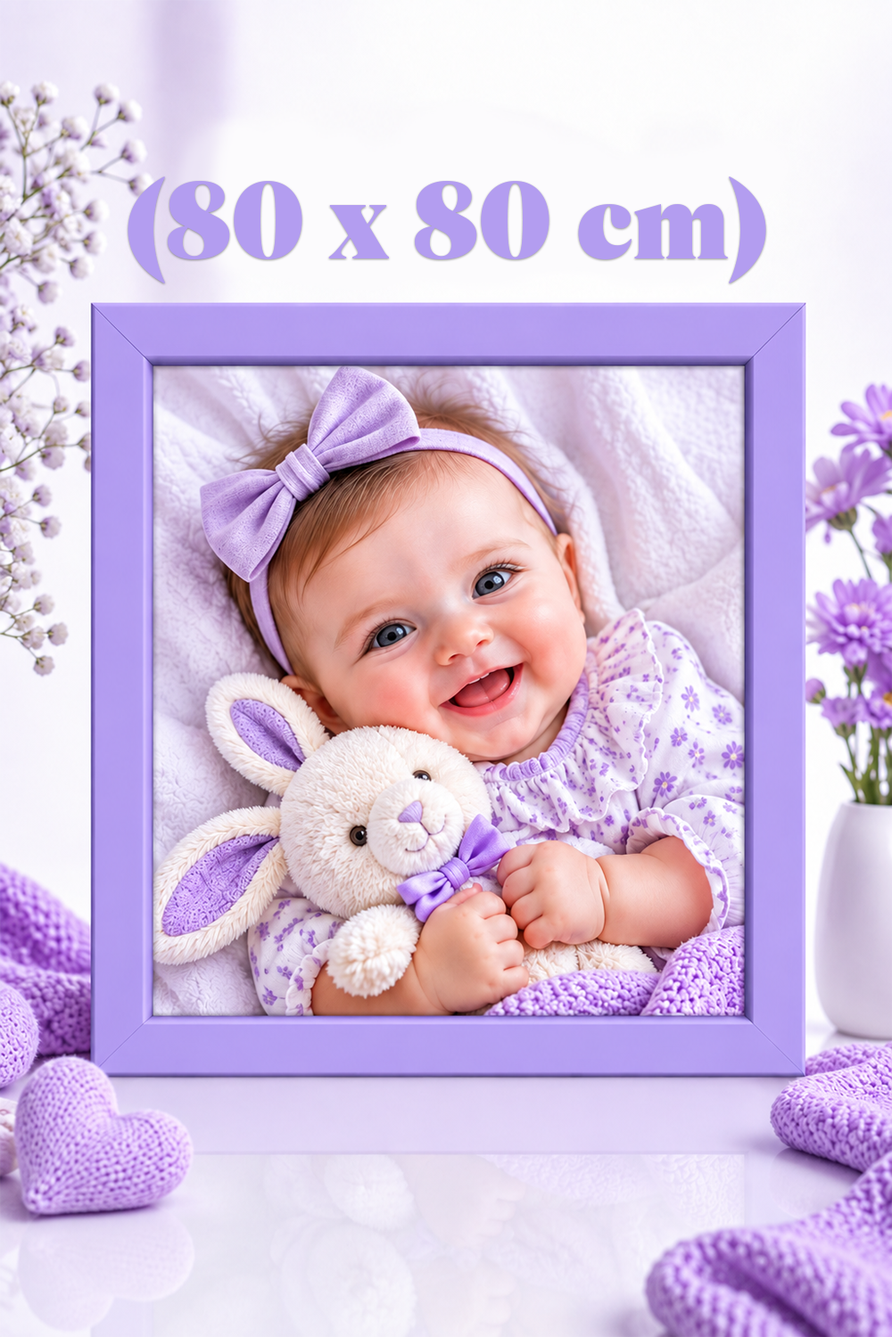
<style>
.page{position:relative;width:892px;height:1337px}
.page>*{position:absolute;margin:0}
.t1{font:112.3px "CotfordDisplay-XBold";color:#b39df0}
</style>
<div class="page">
<p class="t1" style="left:127px;top:177px;width:639px;height:107px">(80 x 80 cm)</p>
</div>
